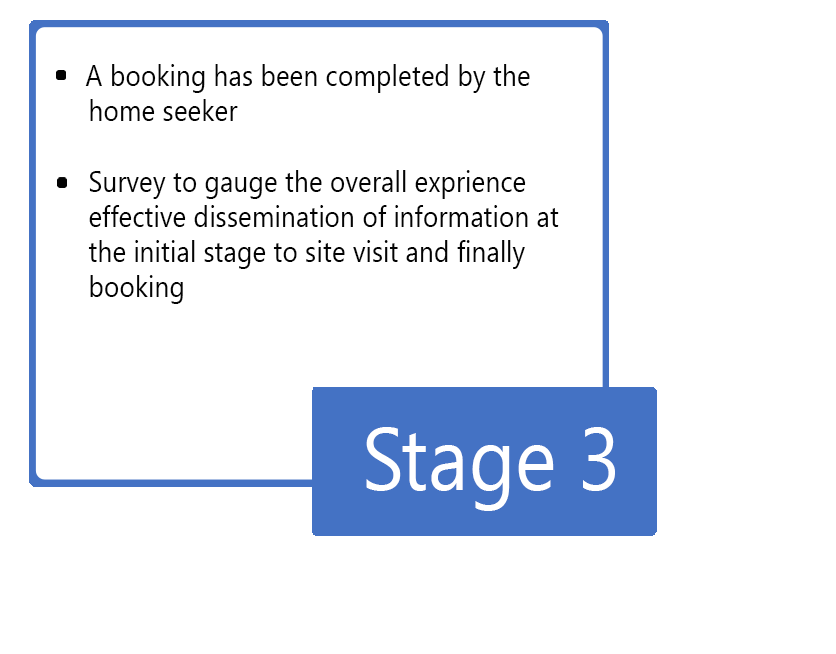
<style>
.page{position:relative;width:836px;height:654px;background:#ffffff}
.page>*{position:absolute;margin:0}
.t1{font:29.3px "SegoeUI";color:#030303;scale:0.9 1}
.t2{font:88px "SegoeUI";color:#ffffff;scale:0.9 1}
</style>
<div class="page">
<p class="t1" style="left:85px;top:64px;width:474px;height:240px">A booking has been completed by the<br> home seeker<br><br> Survey to gauge the overall exprience <br> effective dissemination of information at<br> the initial stage to site visit and finally<br> booking</p>
<p class="t2" style="left:366px;top:427px;width:249px;height:84px">Stage 3</p>
</div>
